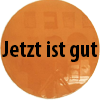
<style>
.page{position:relative;width:100px;height:100px}
.page>*{position:absolute;margin:0}
.t1{font:23.3px "MyriadPro-BoldCond";color:#000000}
</style>
<div class="page">
<p class="t1" style="left:2px;top:41px;width:96px;height:21px">Jetzt ist gut</p>
</div>
